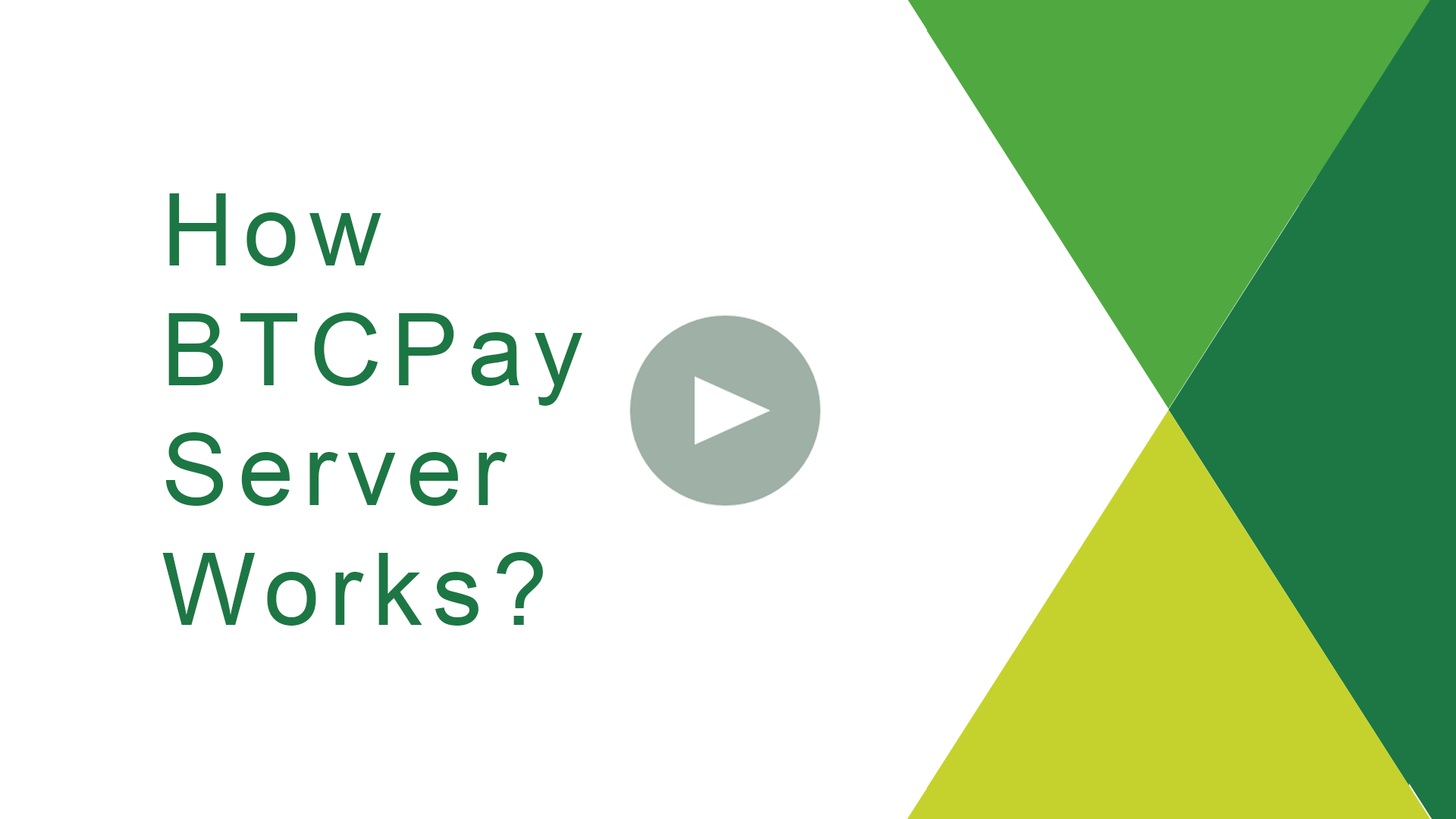
<style>
.page{position:relative;width:1456px;height:819px;background:#ffffff}
.page>*{position:absolute;margin:0}
.t1{font:99.9px "ArialMT";letter-spacing:0.1em;color:#1c7744}
</style>
<div class="page">
<p class="t1" style="left:162px;top:193px;width:420px;height:433px">How<br>BTCPay <br>Server<br>Works?</p>
</div>
